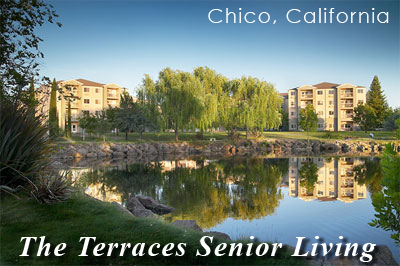
<style>
.page{position:relative;width:400px;height:266px}
.page>*{position:absolute;margin:0}
.t1{font:20.4px "CenturyGothic";letter-spacing:0.05em;color:#ffffff}
.t2{font:28.6px "TimesNewRomanPS-BoldItalicMT";letter-spacing:0.05em;color:#ffffff}
</style>
<div class="page">
<p class="t1" style="left:208px;top:8px;width:181px;height:16px">Chico, California</p>
<p class="t2" style="left:19px;top:236px;width:357px;height:26px">The Terraces Senior Living</p>
</div>
